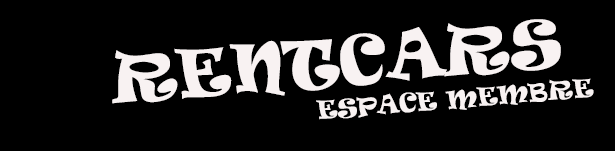
<style>
.page{position:relative;width:615px;height:151px;background:#000000}
.page>*{position:absolute;margin:0}
.t1{font:24px/33px "Ravie";color:#f8f2f2;text-transform:uppercase}
.t2{font:29px/59px "Ravie";color:#f8f2f2;text-transform:uppercase}
.t3{font:63.3px/56px "Ravie";color:#f8f2f2;text-transform:uppercase}
</style>
<div class="page">
<p class="t1" style="left:112px;top:19px;width:482px;height:101px;text-align:center;rotate:-5deg"><span class="t2">                   </span><span class="t3"><br>   RENTCARS</span> <br>                                  Espace membre</p>
</div>
